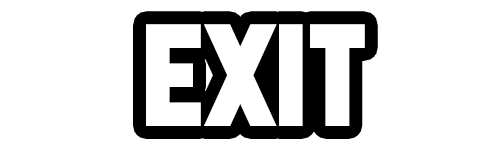
<style>
.page{position:relative;width:500px;height:150px;background:#ffffff}
.page>*{position:absolute;margin:0}
.t1{font:160px "SheSmiles";color:#ffffff}
</style>
<div class="page">
<p class="t1" style="left:146px;top:24px;width:219px;height:102px">exit</p>
</div>
